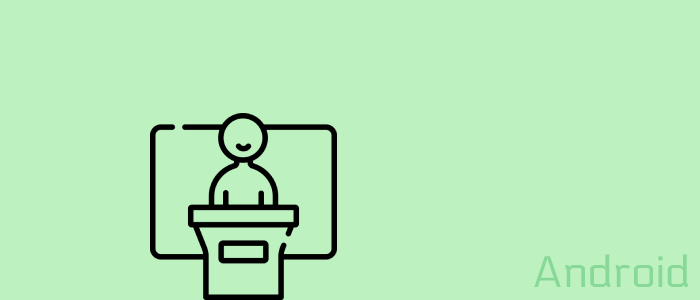
<style>
.page{position:relative;width:700px;height:300px;background:#bdf2c0}
.page>*{position:absolute;margin:0}
.t1{font:44px "Electrolize-Regular";color:#88d998}
</style>
<div class="page">
<p class="t1" style="left:534px;top:254px;width:154px;height:33px">Android</p>
</div>
